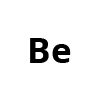
<style>
.page{position:relative;width:100px;height:100px;background:#ffffff}
.page>*{position:absolute;margin:0}
.t1{font:35px "OpenSans-Bold";color:#000000}
</style>
<div class="page">
<p class="t1" style="left:30px;top:38px;width:41px;height:25px">Be</p>
</div>
